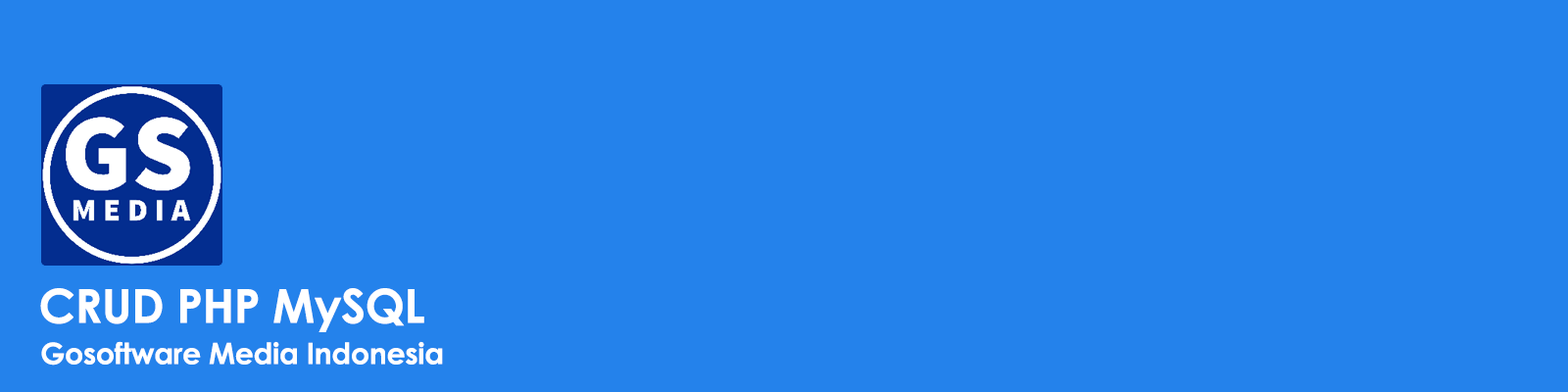
<style>
.page{position:relative;width:1568px;height:392px;background:#2482eb}
.page>*{position:absolute;margin:0}
.t1{font:47px "CenturyGothic-Bold";letter-spacing:-0.01em;color:#ffffff}
.t2{font:29.4px "CenturyGothic-Bold";letter-spacing:-0.01em;color:#ffffff}
</style>
<div class="page">
<p class="t1" style="left:40px;top:288px;width:384px;height:44px">CRUD PHP MySQL</p>
<p class="t2" style="left:41px;top:341px;width:402px;height:25px">Gosoftware Media Indonesia</p>
</div>
